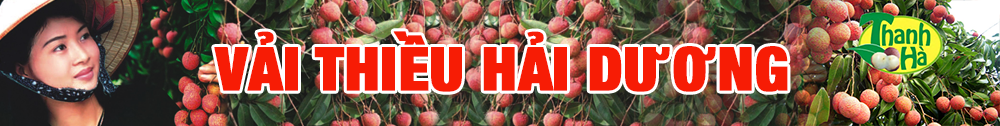
<style>
.page{position:relative;width:1000px;height:126px}
.page>*{position:absolute;margin:0}
.t1{font:60px "HelveticaNeue-CondensedBlack";color:#f71c05;text-transform:uppercase;font-weight:bold}
</style>
<div class="page">
<p class="t1" style="left:214px;top:31px;width:574px;height:61px">Vải thiều Hải dương</p>
</div>
